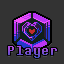
<style>
.page{position:relative;width:64px;height:64px;background:#333333}
.page>*{position:absolute;margin:0}
.t1{font:12px "Better-Determination-Mono";letter-spacing:0.04em}
</style>
<div class="page">
<p class="t1" style="left:8px;top:46px;width:49px;height:12px">Player</p>
</div>
